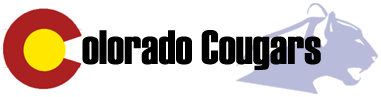
<style>
.page{position:relative;width:381px;height:97px;background:#ffffff}
.page>*{position:absolute;margin:0}
.t1{font:48px "Haettenschweiler";color:#000000}
</style>
<div class="page">
<p class="t1" style="left:82px;top:30px;width:239px;height:40px">olorado Cougars</p>
</div>
